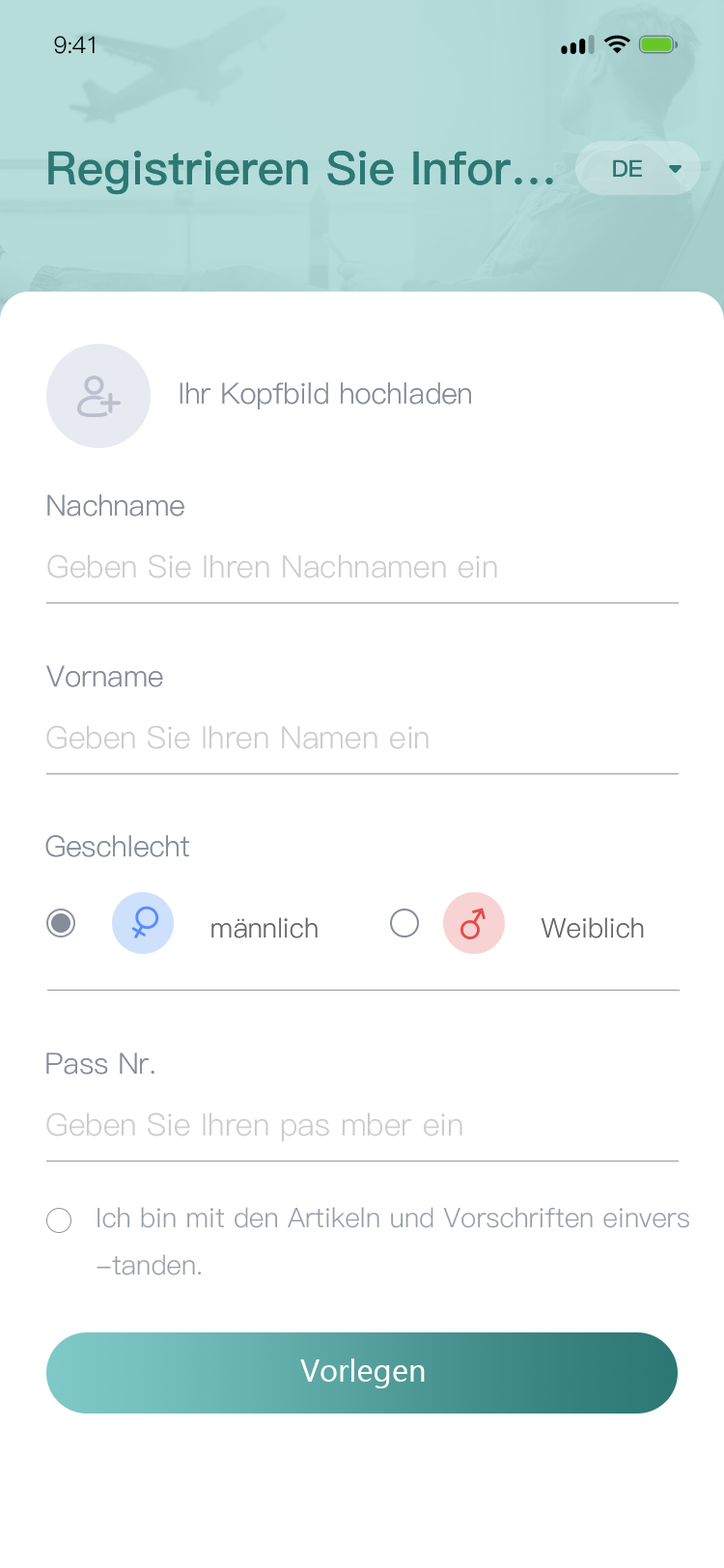
<style>
.page{position:relative;width:724px;height:1568px;background:#ffffff}
.page>*{position:absolute;margin:0}
.t1{font:23.2px "PingFang-SC-Regular";letter-spacing:-0.025em;color:#000000}
.t2{font:46.3px "PingFang-SC-Bold";color:#2c7873}
.t3{font:23.2px "PingFang-SC-Bold";color:#2c7873}
.t4{font:29px "PingFang-SC-Regular";color:#878c9a}
.t5{font:30.9px "PingFang-SC-Regular";color:#cccccc}
.t6{font:29px "PingFang-SC-Regular";color:#878c9a;text-transform:uppercase}
.t7{font:27px "PingFang-SC-Regular";color:#666666}
.t8{font:27px "PingFang-SC-Regular";color:#999da9}
.t9{font:29px "MicrosoftYaHei";color:#ffffff}
</style>
<div class="page">
<p class="t1" style="left:54px;top:36px;width:41px;height:18px">9:41</p>
<p class="t2" style="left:48px;top:151px;width:505px;height:44px">Registrieren Sie Infor…</p>
<p class="t3" style="left:613px;top:159px;width:29px;height:18px">DE</p>
<p class="t4" style="left:180px;top:382px;width:291px;height:27px">Ihr Kopfbild hochladen</p>
<p class="t4" style="left:47px;top:494px;width:137px;height:23px">Nachname</p>
<p class="t5" style="left:47px;top:554px;width:450px;height:24px">Geben Sie Ihren Nachnamen ein</p>
<p class="t4" style="left:46px;top:665px;width:117px;height:22px"><span class="t6">V</span>orname</p>
<p class="t5" style="left:46px;top:725px;width:383px;height:24px">Geben Sie Ihren Namen ein</p>
<p class="t4" style="left:45px;top:835px;width:144px;height:22px"><span class="t6">G</span>eschlecht</p>
<p class="t7" style="left:211px;top:917px;width:107px;height:21px">männlich</p>
<p class="t7" style="left:541px;top:917px;width:103px;height:21px">Weiblich</p>
<p class="t4" style="left:46px;top:1052px;width:108px;height:23px"><span class="t6">P</span>ass Nr.</p>
<p class="t5" style="left:46px;top:1112px;width:416px;height:30px">Geben Sie Ihren pas mber ein</p>
<p class="t8" style="left:97px;top:1207px;width:592px;height:68px">Ich bin mit den Artikeln und Vorschriften einvers<br>-tanden.</p>
<p class="t9" style="left:300px;top:1358px;width:125px;height:30px">Vorlegen</p>
</div>
